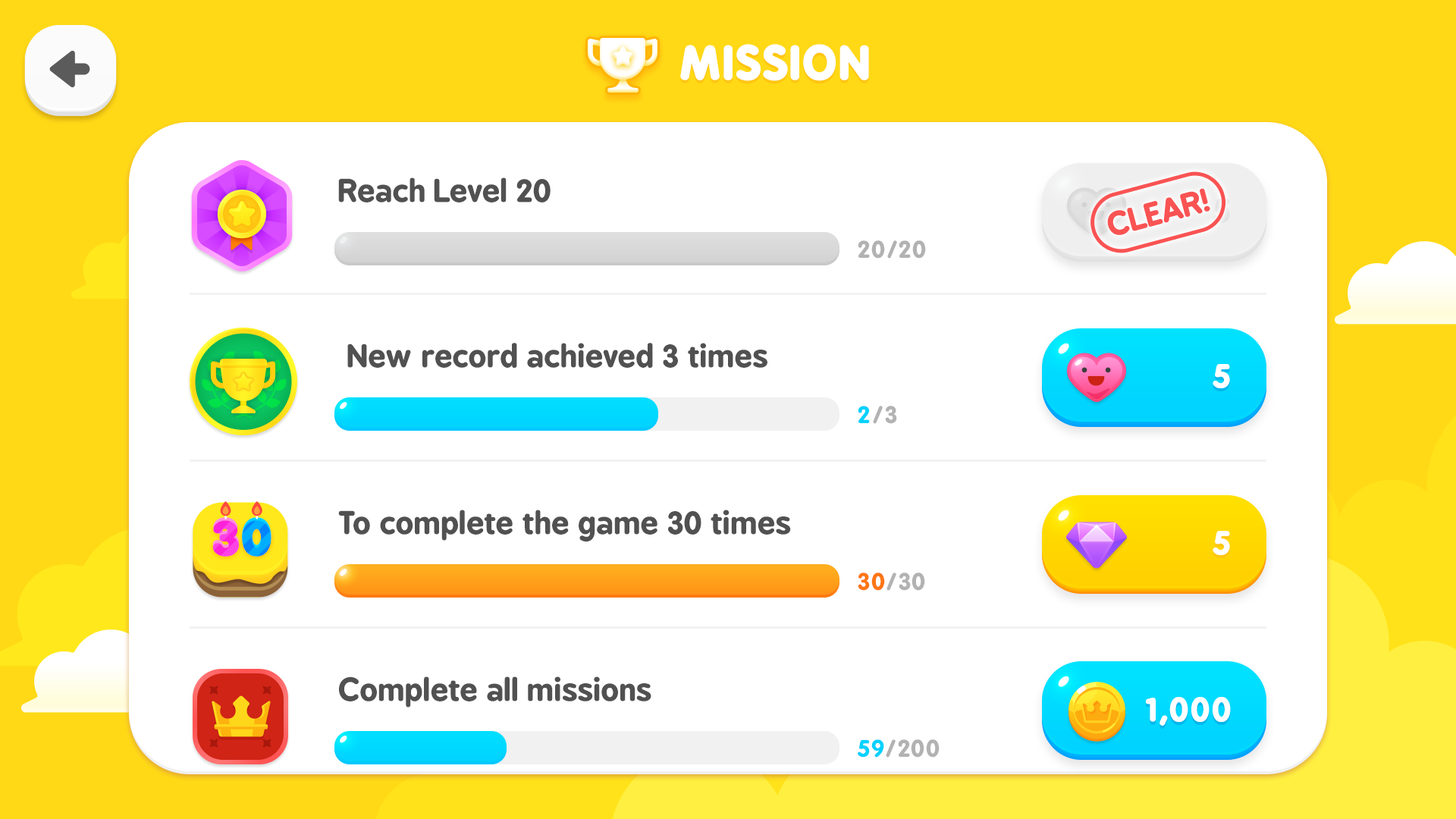
<style>
.page{position:relative;width:1456px;height:819px;background:#ffffff}
.page>*{position:absolute;margin:0}
.t1{font:43.1px "BPreplay-Bold";color:#ffffff;text-transform:uppercase;font-weight:bold;scale:1.05 1}
.t2{font:30px "BPreplay-Bold";letter-spacing:-0.01em;color:#515151;scale:1.05 1}
.t3{font:30.4px "BPreplay-Bold";letter-spacing:-0.01em;color:#f95353;text-transform:uppercase;scale:1.06 1}
.t4{font:22.5px "BPreplay-Bold";color:#b3b2b2;scale:1.05 1}
.t5{font:31.7px "BPreplay-Bold";color:#ffffff;text-transform:uppercase;font-weight:bold;scale:1.05 1}
.t6{font:22.5px "BPreplay-Bold";color:#00d2ff;scale:1.05 1}
.t7{font:43.9px "BPreplay-Bold";text-transform:uppercase;font-weight:bold;scale:1.19 1}
.t8{font:22.5px "BPreplay-Bold";color:#ff7613;scale:1.05 1}
</style>
<div class="page">
<p class="t1" style="left:680px;top:44px;width:189px;height:37px">Mission</p>
<p class="t2" style="left:338px;top:177px;width:213px;height:25px">Reach Level 20</p>
<p class="t3" style="left:1107px;top:188px;width:103px;height:47px;rotate:-15deg">Clear!</p>
<p class="t4" style="left:858px;top:240px;width:68px;height:19px">20/20</p>
<p class="t2" style="left:347px;top:343px;width:420px;height:25px">New record achieved 3 times</p>
<p class="t5" style="left:1213px;top:364px;width:17px;height:24px">5</p>
<p class="t4" style="left:858px;top:406px;width:39px;height:18px"><span class="t6">2</span>/3</p>
<p class="t2" style="left:338px;top:510px;width:453px;height:32px">To complete the game 30 times</p>
<p class="t7" style="left:212px;top:517px;width:59px;height:37px">30</p>
<p class="t7" style="left:212px;top:520px;width:59px;height:37px">30</p>
<p class="t5" style="left:1213px;top:531px;width:17px;height:24px">5</p>
<p class="t4" style="left:858px;top:573px;width:67px;height:18px"><span class="t8">30</span>/30</p>
<p class="t2" style="left:339px;top:676px;width:312px;height:32px">Complete all missions</p>
<p class="t5" style="left:1146px;top:697px;width:85px;height:29px">1,000</p>
<p class="t4" style="left:858px;top:739px;width:82px;height:19px"><span class="t6">59</span>/200</p>
</div>
